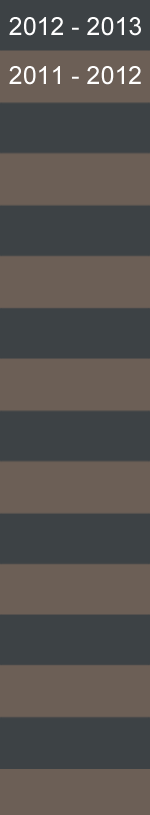
<style>
.page{position:relative;width:150px;height:815px;background:#3d4245}
.page>*{position:absolute;margin:0}
.t1{font:25px "ArialMT";color:#ffffff}
</style>
<div class="page">
<p class="t1" style="left:9px;top:17px;width:132px;height:19px">2012 - 2013</p>
<p class="t1" style="left:9px;top:66px;width:132px;height:19px">2011 - 2012</p>
</div>
